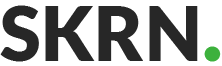
<style>
.page{position:relative;width:222px;height:66px;background:#ffffff}
.page>*{position:absolute;margin:0}
.t1{font:75.4px "Lato-Black";color:#272727}
.t2{font:88px "Lato-Black";color:#3db13d}
</style>
<div class="page">
<p class="t1" style="left:0px;top:5px;width:221px;height:57px">SKRN<span class="t2">.</span></p>
</div>
